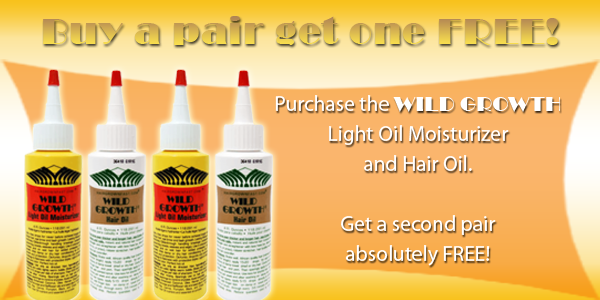
<style>
.page{position:relative;width:600px;height:300px}
.page>*{position:absolute;margin:0}
.t1{font:37.5px "Broadway";letter-spacing:0.035em}
.t2{font:21.4px/30px "MyriadPro-Regular";color:#ffffff}
.t3{font:21.4px/30px "Broadway";color:#ffffff;text-transform:uppercase}
</style>
<div class="page">
<p class="t1" style="left:43px;top:16px;width:515px;height:29px">Buy a pair get one FREE!</p>
<p class="t2" style="left:275px;top:95px;width:285px;height:171px;text-align:center">Purchase the <span class="t3">Wild Growth</span> Light Oil Moisturizer<br>and Hair Oil.<br> <br>Get a second pair<br>absolutely FREE!</p>
</div>
